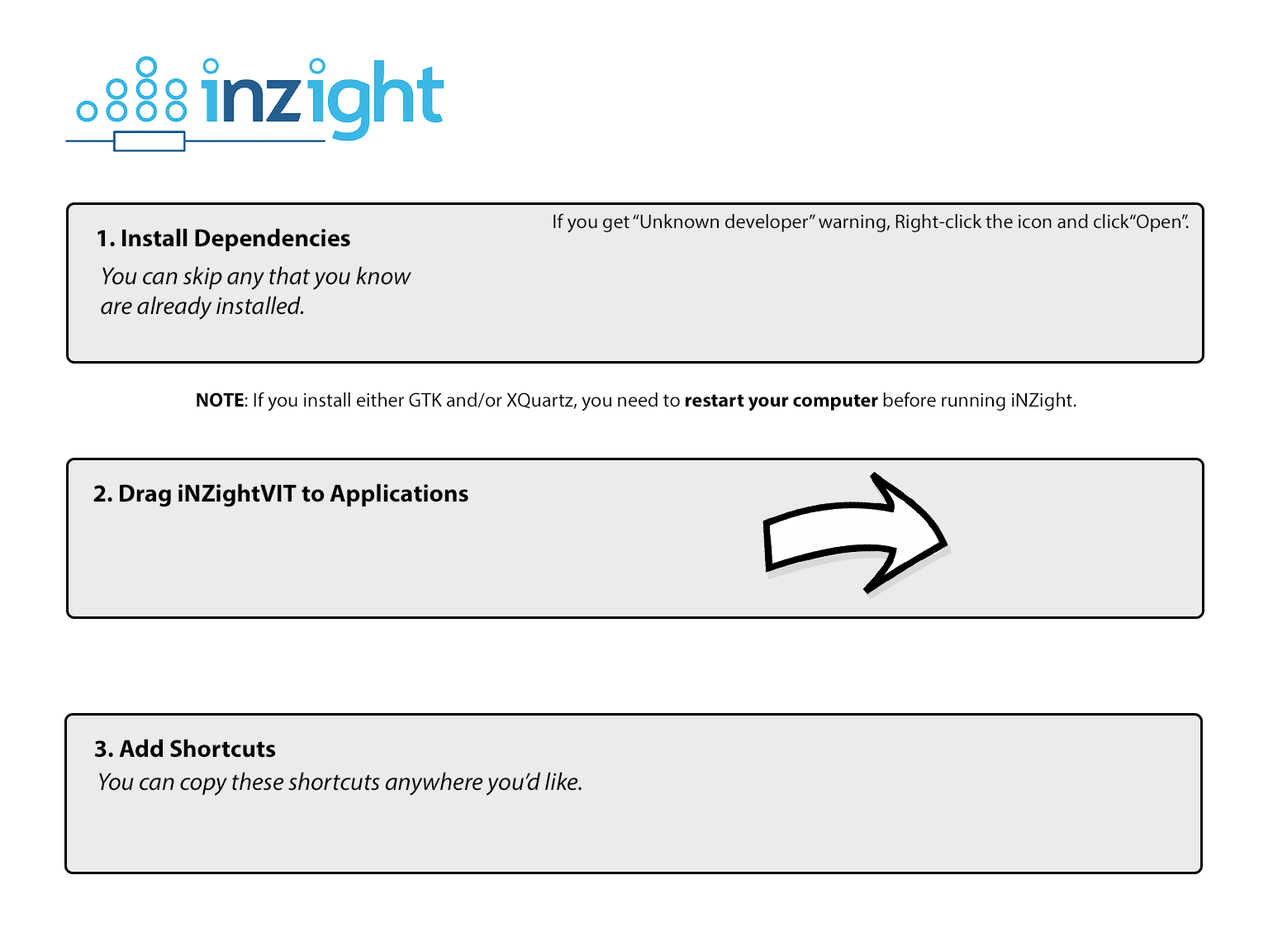
<style>
.page{position:relative;width:1273px;height:937px;background:#ffffff}
.page>*{position:absolute;margin:0}
.t1{font:19.8px "MyriadPro-Regular";color:#000000}
.t2{font:24.8px "MyriadPro-Bold";color:#000000}
.t3{font:24.8px "MyriadPro-It";color:#000000}
.t4{font:19.8px "MyriadPro-Bold";color:#000000}
</style>
<div class="page">
<p class="t1" style="left:553px;top:213px;width:636px;height:20px">If you get “Unknown developer” warning, Right-click the icon and click“Open”.</p>
<p class="t2" style="left:97px;top:228px;width:253px;height:23px">1. Install Dependencies</p>
<p class="t3" style="left:101px;top:266px;width:310px;height:54px">You can skip any that you know<br>are already installed.</p>
<p class="t1" style="left:197px;top:392px;width:879px;height:19px"><span class="t4">NOTE</span>: If you install either GTK and/or XQuartz, you need to <span class="t4">restart your computer </span>before running iNZight.</p>
<p class="t2" style="left:93px;top:483px;width:375px;height:24px">2. Drag iNZightVIT to Applications</p>
<p class="t2" style="left:94px;top:738px;width:182px;height:19px">3. Add Shortcuts</p>
<p class="t3" style="left:99px;top:772px;width:483px;height:23px">You can copy these shortcuts anywhere you’d like.</p>
</div>
